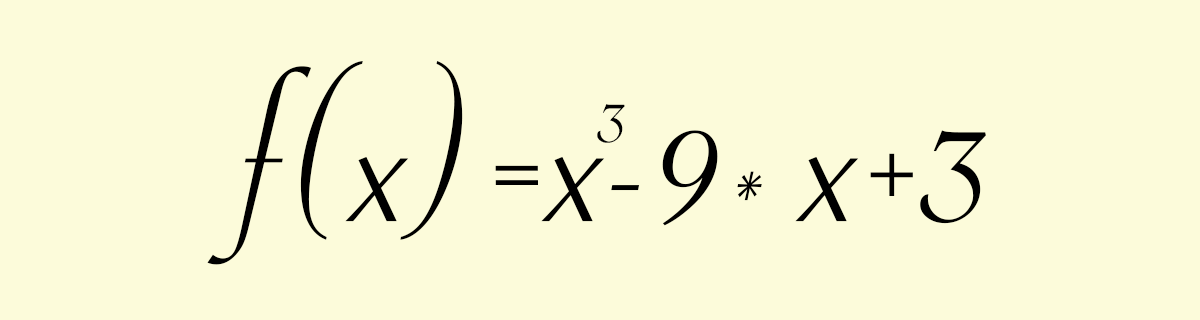
<style>
.page{position:relative;width:1200px;height:320px;background:#fcfbda}
.page>*{position:absolute;margin:0}
.t1{font:161.7px "SavoyeLetPlain";color:#000000}
.t2{font:67.8px "SavoyeLetPlain";color:#000000}
.t3{font:119.6px "SavoyeLetPlain";color:#000000}
</style>
<div class="page">
<p class="t1" style="left:207px;top:61px;width:779px;height:204px">f(x)=x-9  x+3</p>
<p class="t2" style="left:597px;top:104px;width:28px;height:39px">3</p>
<p class="t3" style="left:737px;top:171px;width:25px;height:30px">*</p>
</div>
